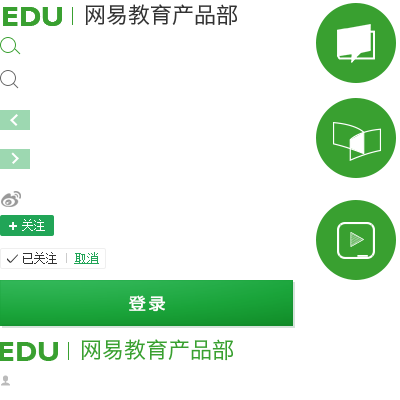
<style>
.page{position:relative;width:400px;height:400px;background:#ffffff}
.page>*{position:absolute;margin:0}
.t1{font:22px "HiraginoSansGB-W3";color:#333333}
.t2{font:28px "GillSansMT-Bold";color:#39a030}
.t3{font:12px "SimSun";color:#ffffff}
.t4{font:22px "HiraginoSansGB-W3";color:#39a030}
</style>
<div class="page">
<p class="t1" style="left:85px;top:4px;width:152px;height:22px">网易教育产品部</p>
<p class="t2" style="left:3px;top:7px;width:59px;height:19px">EDU</p>
<p class="t3" style="left:22px;top:219px;width:23px;height:12px">关注</p>
<p class="t2" style="left:0px;top:342px;width:58px;height:19px">EDU</p>
<p class="t4" style="left:81px;top:339px;width:152px;height:22px">网易教育产品部</p>
</div>
